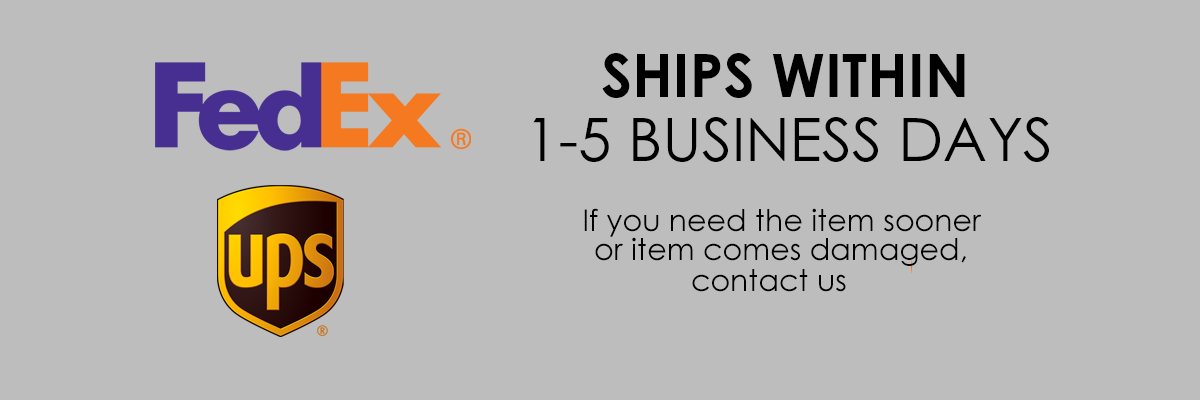
<style>
.page{position:relative;width:1200px;height:400px;background:#bebdbe}
.page>*{position:absolute;margin:0}
.t1{font:60px "CenturyGothic-Bold";color:#000000}
.t2{font:60px "CenturyGothic";color:#000000}
.t3{font:30px "CenturyGothic";color:#000000}
</style>
<div class="page">
<p class="t1" style="left:602px;top:53px;width:363px;height:45px">SHIPS WITHIN</p>
<p class="t2" style="left:533px;top:117px;width:516px;height:45px">1-5 BUSINESS DAYS</p>
<p class="t3" style="left:584px;top:208px;width:398px;height:29px">If you need the item sooner</p>
<p class="t3" style="left:595px;top:237px;width:371px;height:29px">or item comes damaged,</p>
<p class="t3" style="left:692px;top:269px;width:154px;height:23px">contact us</p>
</div>
